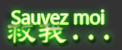
<style>
.page{position:relative;width:122px;height:50px;background:#333333}
.page>*{position:absolute;margin:0}
.t1{font:18.7px "LaoUI";color:#fef6d5}
</style>
<div class="page">
<p class="t1" style="left:12px;top:10px;width:92px;height:14px">Sauvez moi</p>
</div>
